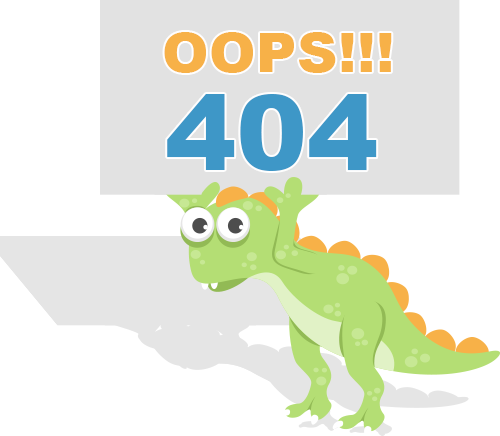
<style>
.page{position:relative;width:500px;height:436px;background:#ffffff}
.page>*{position:absolute;margin:0}
.t1{font:55px "Arial-Black";color:#f7b148}
.t2{font:105px "Arial-Black";color:#3e97c7}
</style>
<div class="page">
<p class="t1" style="left:164px;top:32px;width:228px;height:41px">OOPS!!!</p>
<p class="t2" style="left:167px;top:94px;width:210px;height:77px">404</p>
</div>
